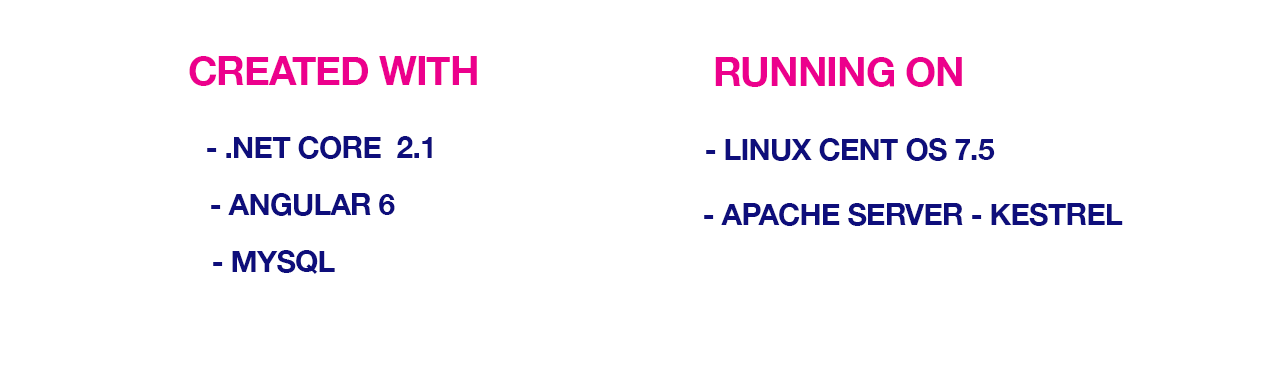
<style>
.page{position:relative;width:1280px;height:380px;background:#ffffff}
.page>*{position:absolute;margin:0}
.t1{font:40px "HelveticaNeue-Bold";letter-spacing:-0.025em;color:#ec008c}
.t2{font:30px "HelveticaNeue-Bold";letter-spacing:-0.025em;color:#0e0e7b}
</style>
<div class="page">
<p class="t1" style="left:189px;top:56px;width:288px;height:30px">CREATED WITH</p>
<p class="t1" style="left:715px;top:57px;width:247px;height:30px">RUNNING ON</p>
<p class="t2" style="left:207px;top:136px;width:225px;height:23px">- .NET CORE  2.1</p>
<p class="t2" style="left:706px;top:138px;width:289px;height:23px">- LINUX CENT OS 7.5</p>
<p class="t2" style="left:211px;top:193px;width:184px;height:23px">- ANGULAR 6</p>
<p class="t2" style="left:704px;top:203px;width:419px;height:23px">- APACHE SERVER - KESTREL</p>
<p class="t2" style="left:213px;top:250px;width:122px;height:24px">- MYSQL</p>
</div>
